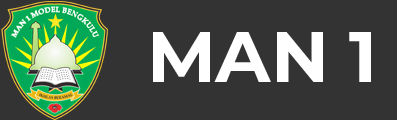
<style>
.page{position:relative;width:397px;height:120px;background:#333333}
.page>*{position:absolute;margin:0}
.t1{font:72px "Montserrat-Bold";color:#ffffff}
</style>
<div class="page">
<p class="t1" style="left:153px;top:32px;width:218px;height:50px">MAN 1</p>
</div>
